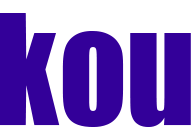
<style>
.page{position:relative;width:191px;height:135px;background:#330099}
.page>*{position:absolute;margin:0}
.t1{font:141.8px "Impact";color:#330099;scale:0.93 1}
</style>
<div class="page">
<p class="t1" style="left:0px;top:13px;width:191px;height:114px">kou</p>
</div>
